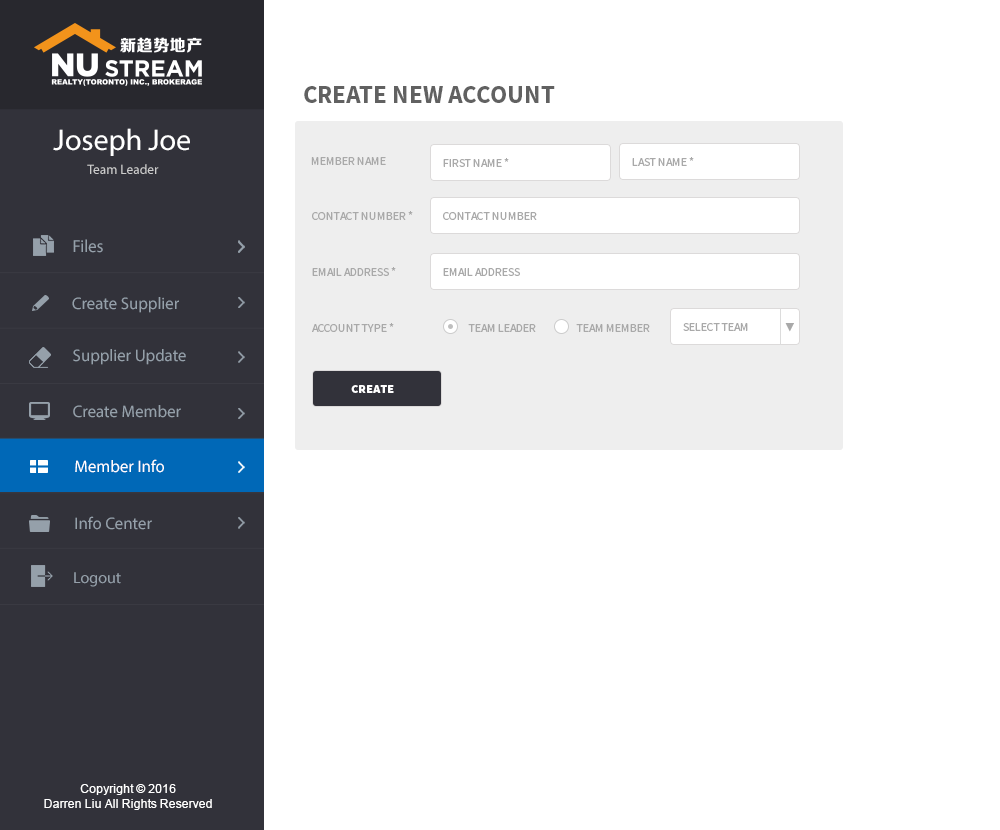
<style>
.page{position:relative;width:1000px;height:830px;background:#ffffff}
.page>*{position:absolute;margin:0}
.t1{font:25px "SourceSansPro-Bold";color:#616161}
.t2{font:30px "MyriadPro-Regular";color:#ffffff}
.t3{font:12px "SourceSansPro-Regular";color:#a9a9a9}
.t4{font:13.4px "MyriadPro-Regular";color:#cccccc}
.t5{font:17.6px "MyriadPro-Regular";color:#95a0aa;scale:0.96 1}
.t6{font:16.8px "MyriadPro-Regular";color:#95a0aa}
.t7{font:10px "AdobeHeitiStd-Regular";color:#a9a9a9}
.t8{font:12px "SourceSansPro-Black";color:#ffffff}
.t9{font:16.8px "MyriadPro-Regular";color:#ffffff}
.t10{font:16px "MyriadPro-Regular";color:#95a0aa}
.t11{font:12px "ArialMT";color:#ffffff}
</style>
<div class="page">
<p class="t1" style="left:304px;top:86px;width:251px;height:17px">CREATE NEW ACCOUNT</p>
<p class="t2" style="left:53px;top:128px;width:137px;height:28px">Joseph Joe</p>
<p class="t3" style="left:311px;top:157px;width:75px;height:8px">MEMBER NAME</p>
<p class="t3" style="left:443px;top:158px;width:66px;height:9px">FIRST NAME *</p>
<p class="t3" style="left:632px;top:157px;width:62px;height:9px">LAST NAME *</p>
<p class="t4" style="left:87px;top:164px;width:72px;height:10px">Team Leader</p>
<p class="t3" style="left:312px;top:211px;width:101px;height:9px">CONTACT NUMBER *</p>
<p class="t3" style="left:443px;top:212px;width:94px;height:8px">CONTACT NUMBER</p>
<p class="t5" style="left:73px;top:239px;width:30px;height:14px">Files</p>
<p class="t3" style="left:312px;top:267px;width:84px;height:9px">EMAIL ADDRESS *</p>
<p class="t3" style="left:443px;top:268px;width:77px;height:8px">EMAIL ADDRESS</p>
<p class="t6" style="left:72px;top:297px;width:107px;height:16px">Create Supplier</p>
<p class="t3" style="left:312px;top:323px;width:82px;height:9px">ACCOUNT TYPE *</p>
<p class="t3" style="left:468px;top:324px;width:68px;height:8px">TEAM LEADER</p>
<p class="t3" style="left:576px;top:324px;width:74px;height:8px">TEAM MEMBER</p>
<p class="t3" style="left:683px;top:323px;width:65px;height:8px">SELECT TEAM</p>
<p class="t7" style="left:785px;top:323px;width:9px;height:9px">▼</p>
<p class="t6" style="left:73px;top:349px;width:113px;height:16px">Supplier Update</p>
<p class="t8" style="left:351px;top:385px;width:43px;height:8px">CREATE</p>
<p class="t6" style="left:73px;top:405px;width:108px;height:13px">Create Member</p>
<p class="t9" style="left:75px;top:459px;width:89px;height:14px">Member Info</p>
<p class="t6" style="left:75px;top:516px;width:77px;height:14px">Info Center</p>
<p class="t10" style="left:74px;top:572px;width:47px;height:15px">Logout</p>
<p class="t11" style="left:44px;top:784px;width:168px;height:26px;text-align:center">Copyright © 2016<br>Darren Liu All Rights Reserved</p>
</div>
